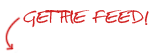
<style>
.page{position:relative;width:150px;height:53px;background:#ffffff}
.page>*{position:absolute;margin:0}
.t1{font:24px "Christopherhand";color:#d12020}
</style>
<div class="page">
<p class="t1" style="left:23px;top:10px;width:126px;height:18px">GET THE FEED!</p>
</div>
